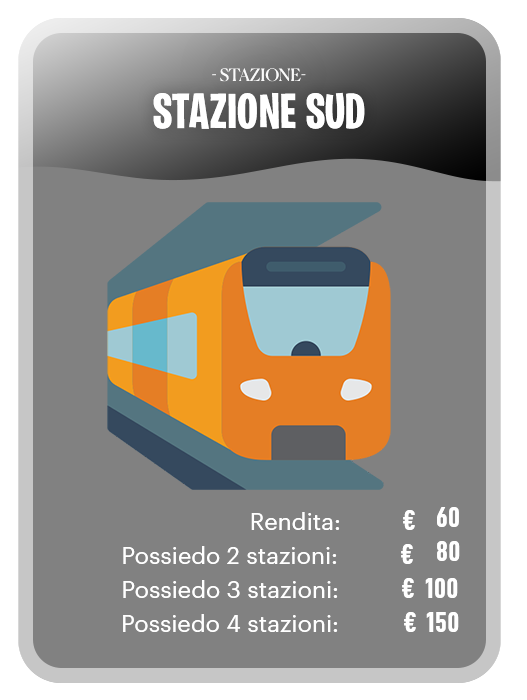
<style>
.page{position:relative;width:527px;height:700px;background:#818181}
.page>*{position:absolute;margin:0}
.t1{font:16.5px "Canela-Regular";letter-spacing:0.01em;color:#ffffff;text-transform:uppercase}
.t2{font:49.3px "BurbankBigCondensed-Bold";letter-spacing:0.01em;color:#ffffff}
.t3{font:29.4px "D-DINCondensed-Bold";letter-spacing:0.01em;color:#ffffff}
.t4{font:23.2px "Graphik-Regular";letter-spacing:0.01em;color:#ffffff}
</style>
<div class="page">
<p class="t1" style="left:212px;top:68px;width:94px;height:14px;opacity:0.97">- Stazione-</p>
<p class="t2" style="left:153px;top:92px;width:212px;height:37px">STAZIONE SUD</p>
<p class="t3" style="left:403px;top:510px;width:12px;height:20px">€</p>
<p class="t3" style="left:437px;top:507px;width:22px;height:20px">60</p>
<p class="t4" style="left:251px;top:512px;width:89px;height:18px">Rendita:</p>
<p class="t3" style="left:401px;top:544px;width:12px;height:20px">€</p>
<p class="t3" style="left:437px;top:541px;width:23px;height:20px">80</p>
<p class="t4" style="left:123px;top:546px;width:214px;height:18px">Possiedo 2 stazioni:</p>
<p class="t4" style="left:123px;top:580px;width:215px;height:18px">Possiedo 3 stazioni:</p>
<p class="t3" style="left:402px;top:578px;width:12px;height:20px">€</p>
<p class="t3" style="left:425px;top:578px;width:33px;height:20px">100</p>
<p class="t4" style="left:123px;top:614px;width:215px;height:18px">Possiedo 4 stazioni:</p>
<p class="t3" style="left:404px;top:612px;width:12px;height:20px">€</p>
<p class="t3" style="left:426px;top:612px;width:33px;height:20px">150</p>
</div>
